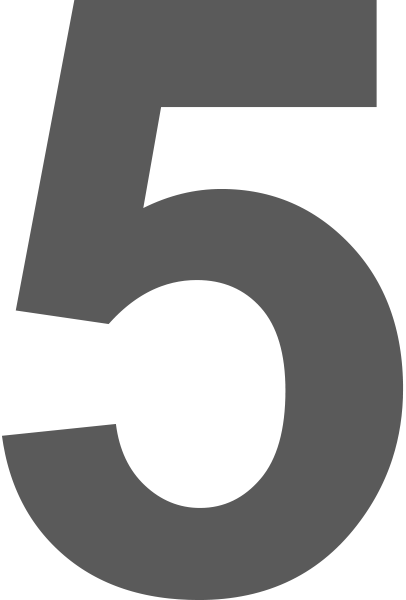
<style>
.page{position:relative;width:406px;height:600px;background:#5a5a5a}
.page>*{position:absolute;margin:0}
.t1{font:833.3px "Arial-BoldMT";letter-spacing:0.04em;color:#5a5a5a}
</style>
<div class="page">
<p class="t1" style="left:1px;top:0px;width:403px;height:600px">5</p>
</div>
